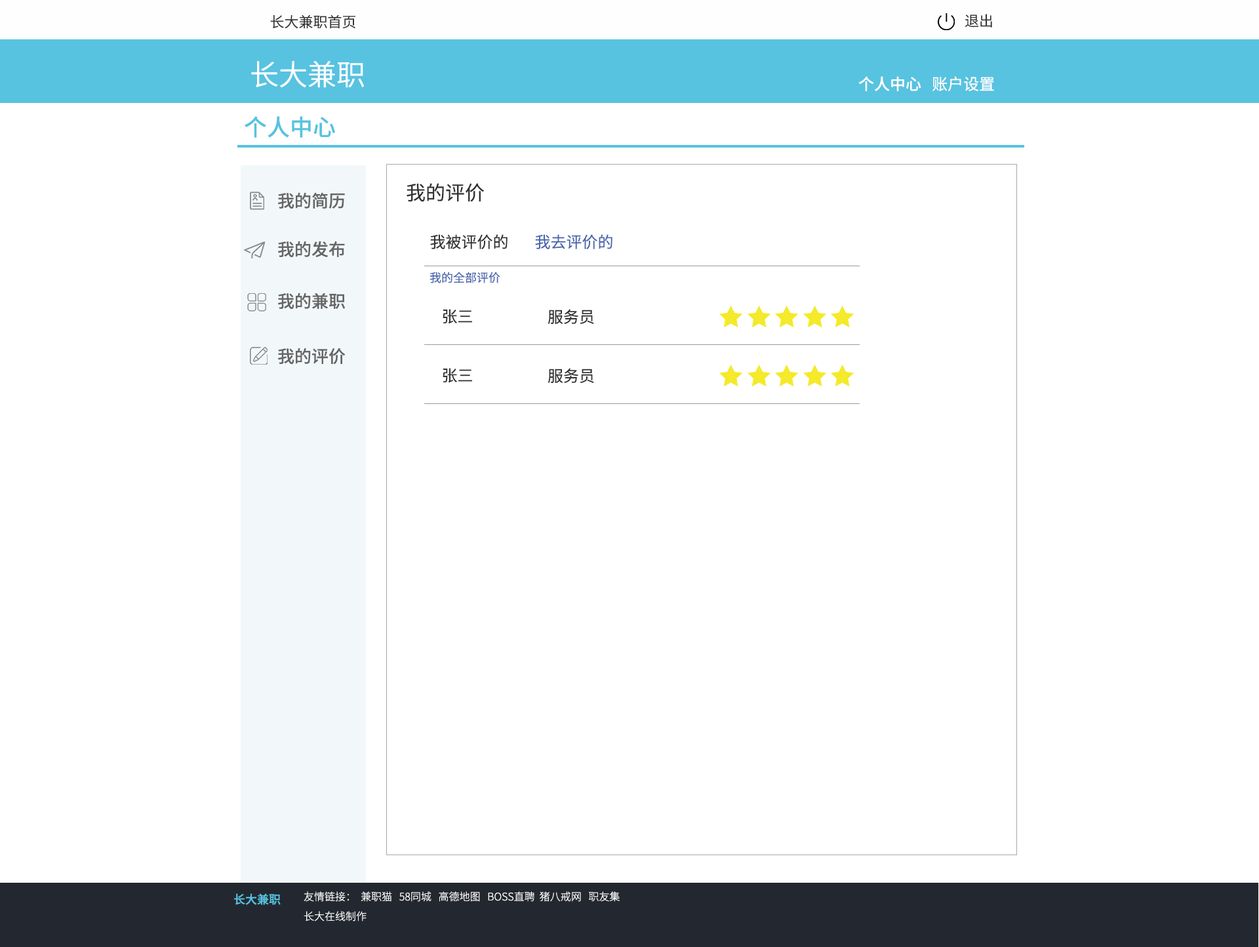
<style>
.page{position:relative;width:1259px;height:947px;background:#ffffff}
.page>*{position:absolute;margin:0}
.t1{font:14.4px "SourceHanSansCN-Normal";color:#333333}
.t2{font:28.9px "SourceHanSansCN-Normal";color:#ffffff}
.t3{font:15.7px "SourceHanSansCN-Medium";color:#ffffff}
.t4{font:15.7px "SourceHanSansCN-Regular";color:#ffffff}
.t5{font:23px "SourceHanSansCN-Medium";color:#57c3e0}
.t6{font:19.7px "SourceHanSansCN-Regular";color:#333333}
.t7{font:17.1px "SourceHanSansCN-Medium";color:#666666}
.t8{font:15.7px "SourceHanSansCN-Regular";color:#333333}
.t9{font:15.7px "SourceHanSansCN-Regular";color:#4a67af}
.t10{font:11.8px "SourceHanSansCN-Regular";color:#4a67af}
.t11{font:11.8px "SourceHanSansCN-Medium";color:#57c3e0}
.t12{font:10.5px "SourceHanSansCN-Light";color:#ffffff}
</style>
<div class="page">
<p class="t1" style="left:270px;top:15px;width:85px;height:14px">长大兼职首页</p>
<p class="t1" style="left:965px;top:14px;width:27px;height:14px">退出</p>
<p class="t2" style="left:251px;top:61px;width:113px;height:27px">长大兼职</p>
<p class="t3" style="left:858px;top:76px;width:136px;height:15px">个人中心<span class="t4">   账户设置</span></p>
<p class="t5" style="left:245px;top:116px;width:90px;height:22px">个人中心</p>
<p class="t6" style="left:407px;top:183px;width:78px;height:19px">我的评价</p>
<p class="t7" style="left:278px;top:192px;width:67px;height:17px">我的简历</p>
<p class="t7" style="left:278px;top:241px;width:67px;height:17px">我的发布</p>
<p class="t8" style="left:430px;top:234px;width:78px;height:15px">我被评价的</p>
<p class="t9" style="left:535px;top:234px;width:78px;height:15px">我去评价的</p>
<p class="t10" style="left:430px;top:272px;width:70px;height:11px">我的全部评价</p>
<p class="t7" style="left:278px;top:292px;width:67px;height:18px">我的兼职</p>
<p class="t8" style="left:443px;top:309px;width:29px;height:15px">张三</p>
<p class="t8" style="left:548px;top:309px;width:46px;height:15px">服务员</p>
<p class="t7" style="left:278px;top:348px;width:68px;height:17px">我的评价</p>
<p class="t8" style="left:443px;top:368px;width:29px;height:15px">张三</p>
<p class="t8" style="left:548px;top:368px;width:46px;height:15px">服务员</p>
<p class="t11" style="left:234px;top:893px;width:47px;height:12px">长大兼职</p>
<p class="t12" style="left:304px;top:891px;width:316px;height:11px">友情链接：  兼职猫   58同城   高德地图   BOSS直聘  猪八戒网   职友集</p>
<p class="t12" style="left:304px;top:911px;width:63px;height:10px">长大在线制作</p>
</div>
